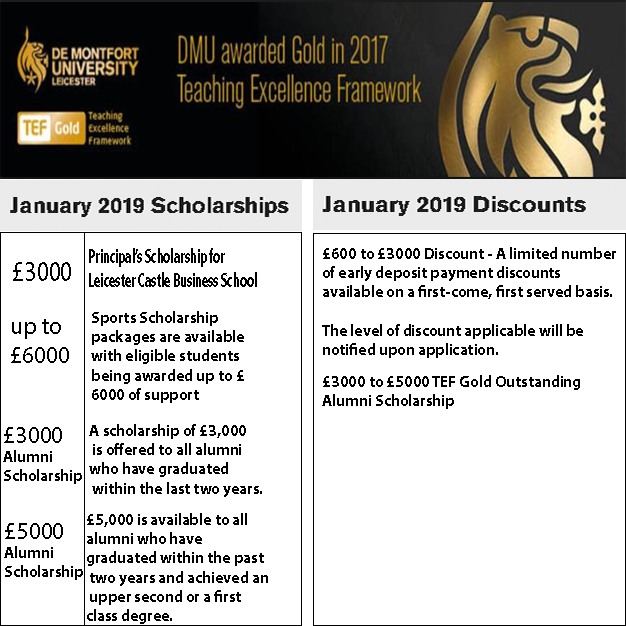
<style>
.page{position:relative;width:626px;height:626px;background:#ffffff}
.page>*{position:absolute;margin:0}
.t1{font:20.7px "MyriadPro-Bold";color:#000000;scale:0.57 1}
.t2{font:16px "MyriadPro-Bold";color:#000000}
.t3{font:29.2px "MyriadPro-Regular";color:#000000;scale:0.82 1}
.t4{font:24px "MyriadPro-Regular";color:#000000}
</style>
<div class="page">
<p class="t1" style="left:89px;top:248px;width:168px;height:39px">Principal’s Scholarship for<br> Leicester Castle Business School</p>
<p class="t2" style="left:322px;top:247px;width:294px;height:111px">£600 to £3000 Discount - A limited number <br>of early deposit payment discounts <br>available on a first-come, first served basis.<br><br>The level of discount applicable will be <br>notified upon application.</p>
<p class="t3" style="left:13px;top:262px;width:58px;height:19px">£3000</p>
<p class="t2" style="left:91px;top:311px;width:153px;height:92px">Sports Scholarship <br>packages are available <br>with eligible students <br>being awarded up to £<br>6000 of support</p>
<p class="t4" style="left:11px;top:319px;width:58px;height:44px">up to <br>£6000</p>
<p class="t2" style="left:322px;top:375px;width:258px;height:34px">£3000 to £5000 TEF Gold Outstanding <br>Alumni Scholarship</p>
<p class="t2" style="left:89px;top:424px;width:173px;height:73px">A scholarship of £3,000<br> is offered to all alumni <br>who have graduated<br> within the last two years.</p>
<p class="t2" style="left:3px;top:427px;width:79px;height:57px"><span class="t4">£3000 <br></span>Alumni <br>Scholarship</p>
<p class="t2" style="left:87px;top:513px;width:181px;height:111px">£5,000 is available to all <br>alumni who have <br>graduated within the past<br> two years and achieved an<br> upper second or a first <br>class degree.</p>
<p class="t2" style="left:4px;top:523px;width:79px;height:57px"><span class="t4">£5000 <br></span>Alumni <br>Scholarship</p>
</div>
